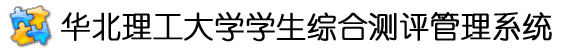
<style>
.page{position:relative;width:580px;height:52px;background:#ffffff}
.page>*{position:absolute;margin:0}
.t1{font:30px "YouYuan";color:#020202;font-weight:bold}
</style>
<div class="page">
<p class="t1" style="left:61px;top:12px;width:491px;height:30px">华北理工大学学生综合测评管理系统</p>
</div>
